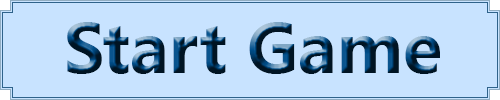
<style>
.page{position:relative;width:500px;height:100px;background:#c8e3ff}
.page>*{position:absolute;margin:0}
.t1{font:72px "KhmerUI-Bold"}
</style>
<div class="page">
<p class="t1" style="left:67px;top:22px;width:373px;height:52px">Start Game</p>
</div>
